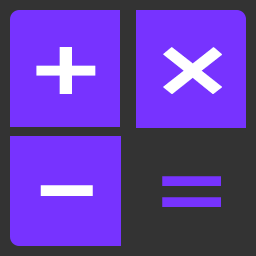
<style>
.page{position:relative;width:256px;height:256px;background:#7733ff}
.page>*{position:absolute;margin:0}
.t1{font:99px "NirmalaUI-Bold";color:#ffffff;scale:1.25 1}
.t2{font:99px "NirmalaUI-Bold";color:#7733ff;scale:1.25 1}
</style>
<div class="page">
<p class="t1" style="left:36px;top:47px;width:60px;height:47px">+</p>
<p class="t1" style="left:163px;top:47px;width:59px;height:47px">×</p>
<p class="t2" style="left:162px;top:176px;width:59px;height:31px">=</p>
</div>
